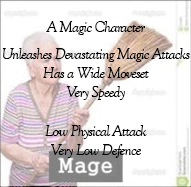
<style>
.page{position:relative;width:191px;height:187px;background:#ffffff}
.page>*{position:absolute;margin:0}
.t1{font:16px "GoudyOldStyleT-Italic";letter-spacing:-0.05em;color:#010101}
</style>
<div class="page">
<p class="t1" style="left:2px;top:21px;width:188px;height:137px;text-align:center">A Magic Character<br><br>Unleashes Devastating Magic Attacks<br>Has a Wide Moveset<br>Very Speedy<br><br>Low Physical Attack<br>Very Low Defence</p>
</div>
